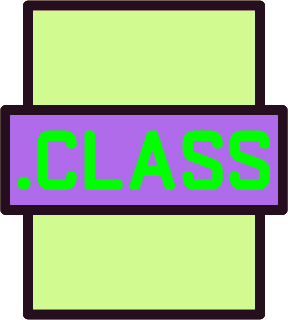
<style>
.page{position:relative;width:288px;height:320px;background:#d1fa90}
.page>*{position:absolute;margin:0}
.t1{font:88px "MonomaniacOne-Regular";color:#00ff00}
</style>
<div class="page">
<p class="t1" style="left:17px;top:130px;width:253px;height:60px">.CLASS</p>
</div>
